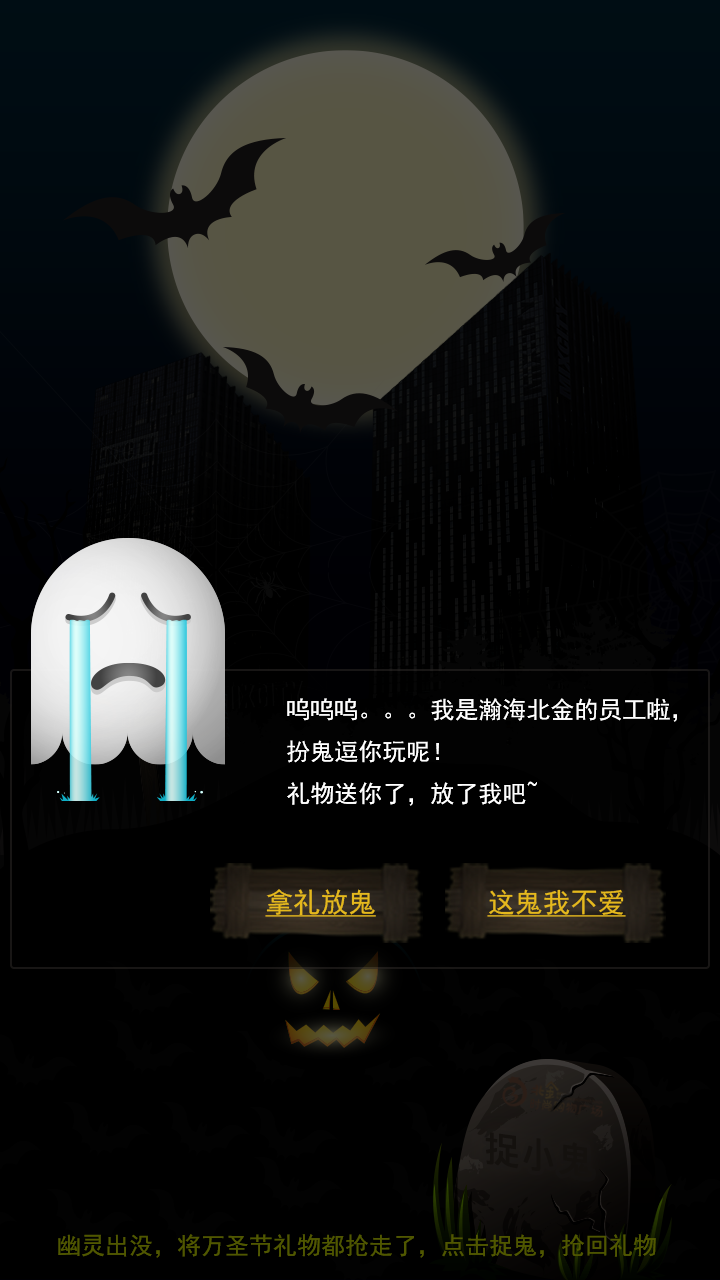
<style>
.page{position:relative;width:720px;height:1280px;background:#000000}
.page>*{position:absolute;margin:0}
.t1{font:24px "SimHei";color:#ffffff}
.t2{font:27.6px "SimHei";color:#e5b91d;text-decoration:underline}
</style>
<div class="page">
<p class="t1" style="left:287px;top:698px;width:390px;height:108px">呜呜呜。。。我是瀚海北金的员工啦，扮鬼逗你玩呢！<br>礼物送你了，放了我吧~</p>
<p class="t2" style="left:265px;top:889px;width:111px;height:28px">拿礼放鬼</p>
<p class="t2" style="left:487px;top:889px;width:139px;height:28px">这鬼我不爱</p>
</div>
